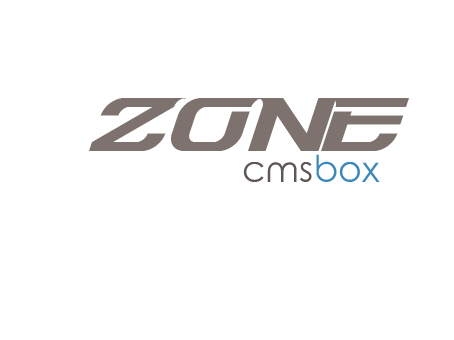
<style>
.page{position:relative;width:454px;height:340px;background:#ffffff}
.page>*{position:absolute;margin:0}
.t1{font:72px "Dash9812";letter-spacing:-0.27em;color:#7d726e}
.t2{font:36px "RoundedElegance-Regular";color:#5f5656}
.t3{font:36px "RoundedElegance-Regular";color:#3c88b9}
</style>
<div class="page">
<p class="t1" style="left:89px;top:98px;width:321px;height:53px">ZONE</p>
<p class="t2" style="left:243px;top:154px;width:137px;height:28px">cms<span class="t3">box</span></p>
</div>
